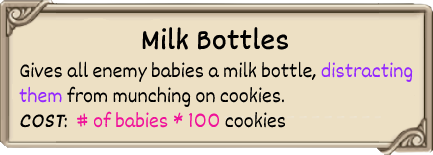
<style>
.page{position:relative;width:433px;height:155px;background:#ede0c4}
.page>*{position:absolute;margin:0}
.t1{font:30px "Dekko";color:#000000;font-weight:bold}
.t2{font:21px "Dekko";color:#000000}
.t3{font:21px "Dekko";color:#9428ff}
.t4{font:21px "Dekko";color:#000000;font-weight:bold;font-style:italic}
.t5{font:21px "Dekko";color:#f0129a}
</style>
<div class="page">
<p class="t1" style="left:142px;top:27px;width:147px;height:23px">Milk Bottles</p>
<p class="t2" style="left:19px;top:61px;width:394px;height:67px">Gives all enemy babies a milk bottle, <span class="t3">distracting<br>them </span>from munching on cookies.<br><span class="t4">COST</span>:  <span class="t5"># of babies * 100 </span>cookies</p>
</div>
